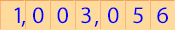
<style>
.page{position:relative;width:175px;height:30px;background:#fedb9d}
.page>*{position:absolute;margin:0}
.t1{font:24px "MyriadPro-Regular";letter-spacing:-0.025em;color:#0000ff}
</style>
<div class="page">
<p class="t1" style="left:14px;top:7px;width:6px;height:16px">1</p>
<p class="t1" style="left:33px;top:7px;width:11px;height:17px">0</p>
<p class="t1" style="left:57px;top:7px;width:11px;height:17px">0</p>
<p class="t1" style="left:81px;top:7px;width:10px;height:17px">3</p>
<p class="t1" style="left:108px;top:7px;width:11px;height:17px">0</p>
<p class="t1" style="left:133px;top:7px;width:10px;height:17px">5</p>
<p class="t1" style="left:157px;top:7px;width:11px;height:17px">6</p>
<p class="t1" style="left:21px;top:21px;width:5px;height:6px">,</p>
<p class="t1" style="left:94px;top:21px;width:5px;height:6px">,</p>
</div>
